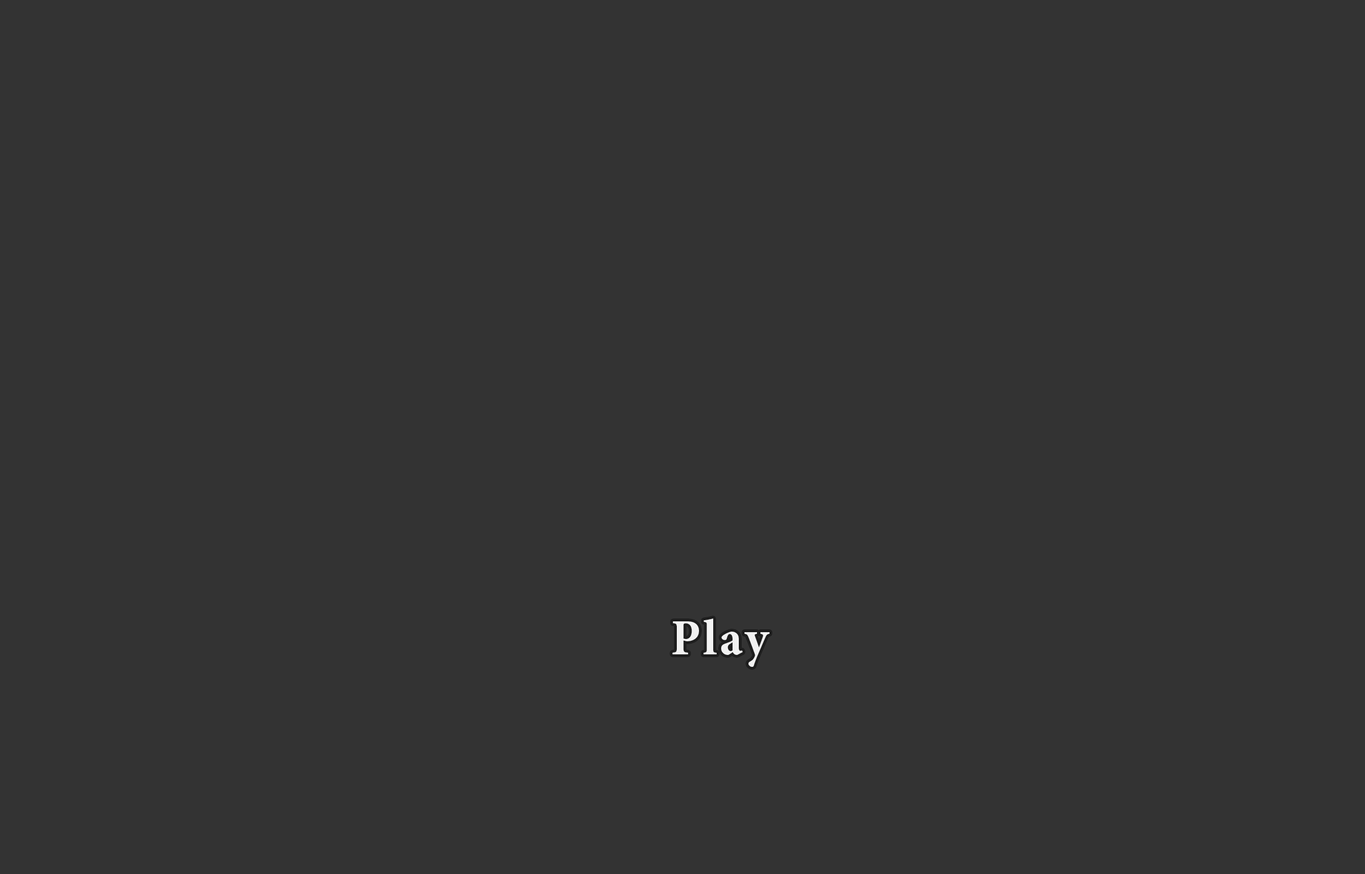
<style>
.page{position:relative;width:1365px;height:874px;background:#333333}
.page>*{position:absolute;margin:0}
.t1{font:50.6px "MinionPro-Bold";letter-spacing:0.05em;color:#f2f2f2}
</style>
<div class="page">
<p class="t1" style="left:672px;top:618px;width:98px;height:49px">Play</p>
</div>
